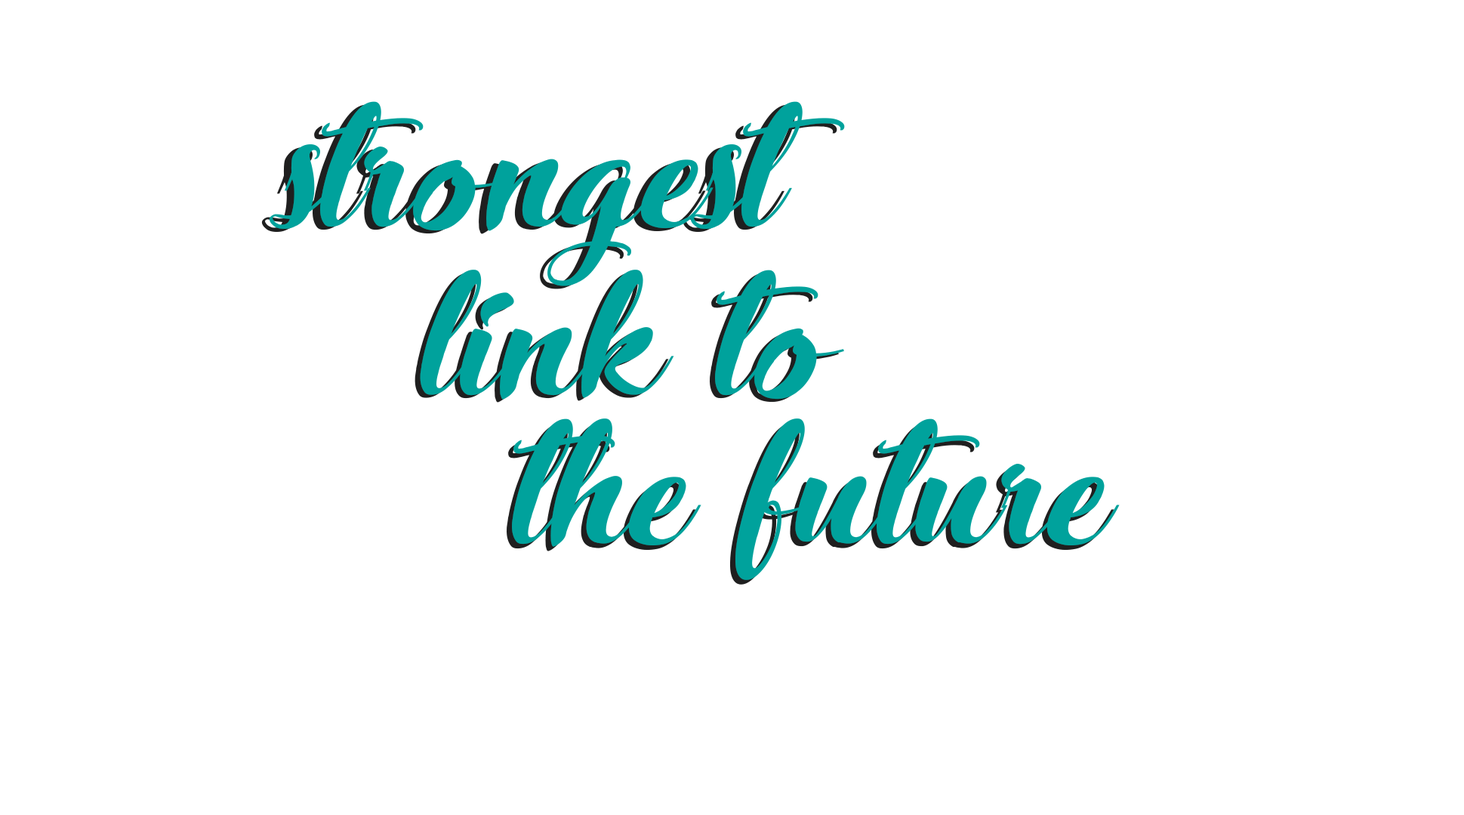
<style>
.page{position:relative;width:1464px;height:815px;background:#ffffff}
.page>*{position:absolute;margin:0}
.t1{font:289.8px "Stardust-Adventure";letter-spacing:-0.01em;color:#00a29c}
.t2{font:289.8px "Stardust-Adventure";letter-spacing:-0.01em}
</style>
<div class="page">
<p class="t1" style="left:269px;top:101px;width:576px;height:185px">strongest</p>
<p class="t2" style="left:261px;top:104px;width:576px;height:185px">strongest</p>
<p class="t1" style="left:420px;top:270px;width:424px;height:129px">link to</p>
<p class="t1" style="left:414px;top:273px;width:425px;height:129px">link to</p>
<p class="t1" style="left:507px;top:423px;width:607px;height:161px">the future</p>
<p class="t1" style="left:512px;top:418px;width:608px;height:162px">the future</p>
</div>
